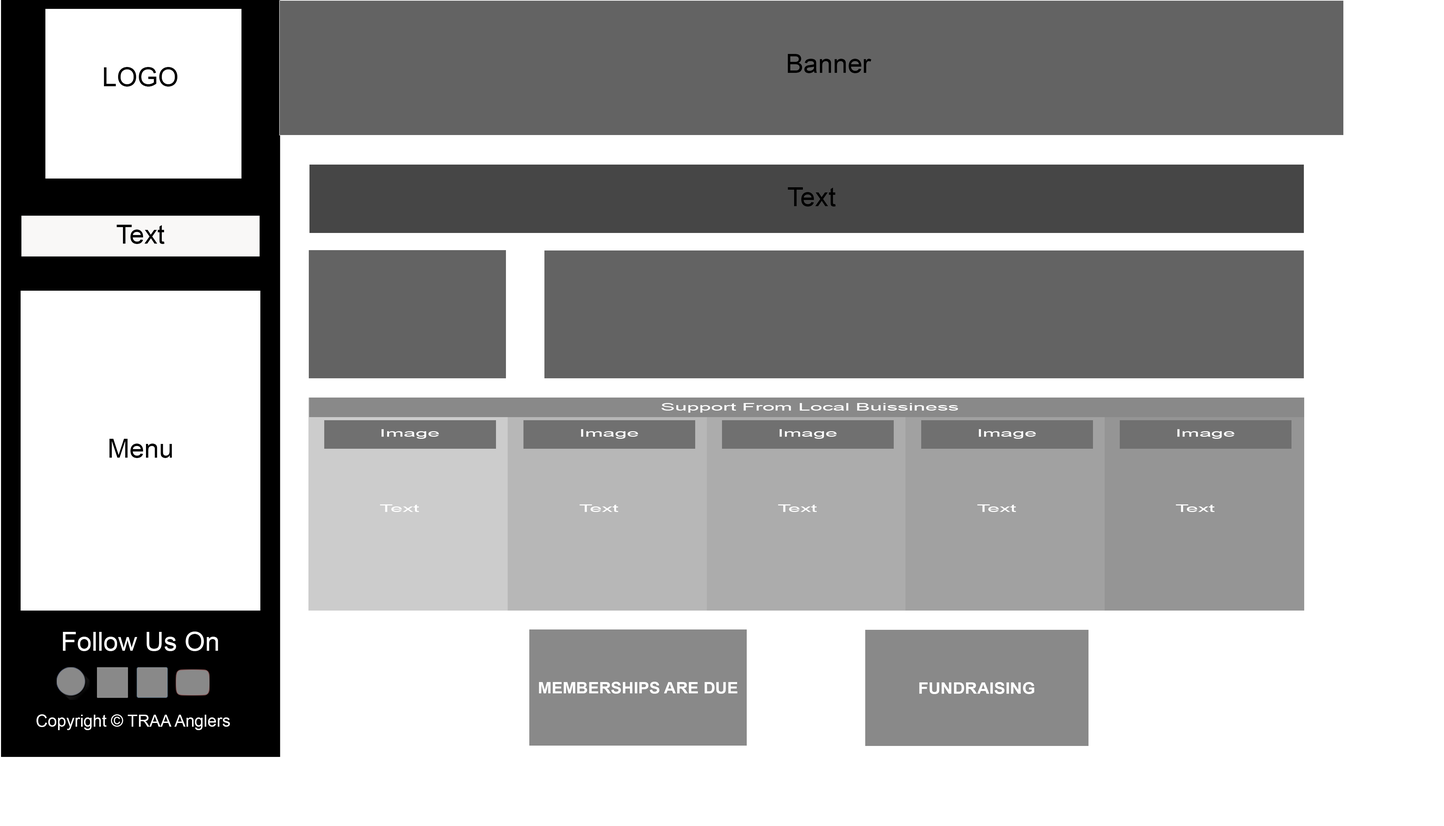
<style>
.page{position:relative;width:1444px;height:826px;background:#ffffff}
.page>*{position:absolute;margin:0}
.t1{font:26.5px "ArialMT";color:#000000}
.t2{font:10.2px "ArialMT";color:#ffffff;scale:2.11 1}
.t3{font:26.5px "ArialMT";color:#ffffff}
.t4{font:15.9px "Arial-BoldMT";color:#ffffff;scale:1.03 1}
.t5{font:15.9px "Arial-BoldMT";color:#ffffff;scale:1.06 1}
.t6{font:16.5px "ArialMT";color:#ffffff}
</style>
<div class="page">
<p class="t1" style="left:788px;top:54px;width:83px;height:19px">Banner</p>
<p class="t1" style="left:104px;top:67px;width:74px;height:20px">LOGO</p>
<p class="t1" style="left:788px;top:187px;width:48px;height:19px">Text</p>
<p class="t1" style="left:116px;top:225px;width:49px;height:19px">Text</p>
<p class="t2" style="left:661px;top:403px;width:297px;height:10px">Support From Local Buissiness</p>
<p class="t2" style="left:381px;top:429px;width:58px;height:10px">Image</p>
<p class="t2" style="left:581px;top:429px;width:57px;height:10px">Image</p>
<p class="t2" style="left:779px;top:429px;width:58px;height:10px">Image</p>
<p class="t2" style="left:979px;top:429px;width:57px;height:10px">Image</p>
<p class="t2" style="left:1177px;top:429px;width:58px;height:10px">Image</p>
<p class="t1" style="left:109px;top:439px;width:63px;height:19px">Menu</p>
<p class="t2" style="left:380px;top:504px;width:39px;height:8px">Text</p>
<p class="t2" style="left:579px;top:504px;width:39px;height:8px">Text</p>
<p class="t2" style="left:778px;top:504px;width:39px;height:8px">Text</p>
<p class="t2" style="left:977px;top:504px;width:39px;height:8px">Text</p>
<p class="t2" style="left:1176px;top:504px;width:39px;height:8px">Text</p>
<p class="t3" style="left:63px;top:631px;width:155px;height:20px">Follow Us On</p>
<p class="t4" style="left:539px;top:681px;width:198px;height:13px">MEMBERSHIPS ARE DUE</p>
<p class="t5" style="left:919px;top:682px;width:115px;height:12px">FUNDRAISING</p>
<p class="t6" style="left:36px;top:714px;width:194px;height:16px">Copyright © TRAA Anglers</p>
</div>
